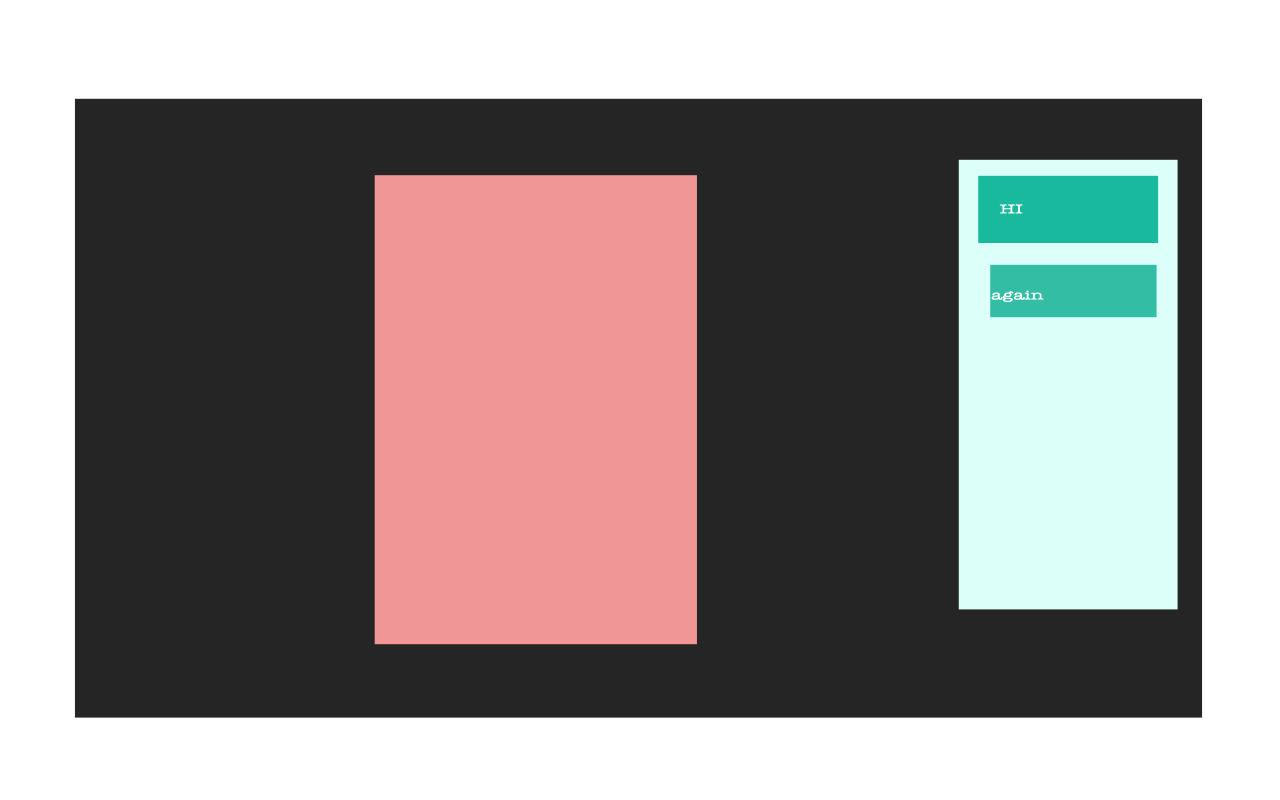
<style>
.page{position:relative;width:1280px;height:800px;background:#252525}
.page>*{position:absolute;margin:0}
.t1{font:13.2px "AmericanTypewriter";color:#ffffff;scale:1.51 1}
</style>
<div class="page">
<p class="t1" style="left:999px;top:204px;width:24px;height:10px">HI</p>
<p class="t1" style="left:991px;top:290px;width:53px;height:12px">again</p>
</div>
